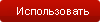
<style>
.page{position:relative;width:100px;height:22px}
.page>*{position:absolute;margin:0}
.t1{font:11px "ArialMT";color:#ffffff}
</style>
<div class="page">
<p class="t1" style="left:17px;top:7px;width:72px;height:8px">Использовать</p>
</div>
